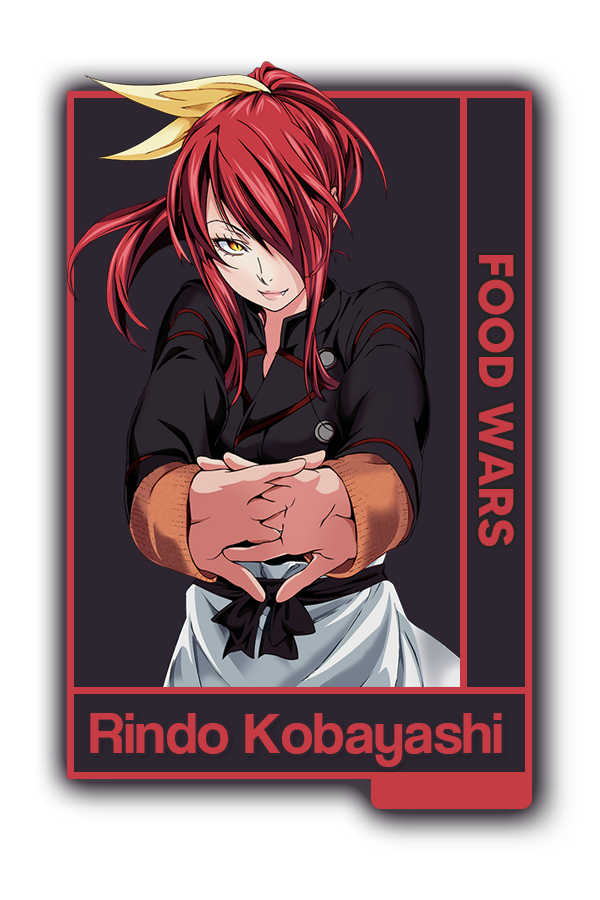
<style>
.page{position:relative;width:600px;height:900px;background:#2d252f}
.page>*{position:absolute;margin:0}
.t1{font:48.8px "MADETOMMY-Bold";color:#c73b44}
.t2{font:60.3px "CoolveticaRg-Regular";color:#c73b44}
</style>
<div class="page">
<p class="t1" style="left:478px;top:255px;width:36px;height:291px;rotate:90deg">FOOD WARS</p>
<p class="t2" style="left:90px;top:713px;width:412px;height:54px">Rindo Kobayashi</p>
</div>
